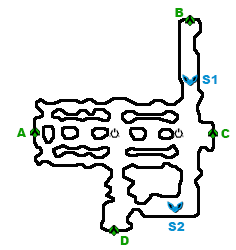
<style>
.page{position:relative;width:236px;height:250px;background:#ffffff}
.page>*{position:absolute;margin:0}
.t1{font:12px "Arial-Black";color:#0d9e01}
.t2{font:12px "Arial-Black";color:#0692d2}
</style>
<div class="page">
<p class="t1" style="left:175px;top:8px;width:9px;height:9px">B</p>
<p class="t2" style="left:202px;top:75px;width:15px;height:9px">S1</p>
<p class="t1" style="left:16px;top:128px;width:10px;height:9px">A</p>
<p class="t1" style="left:221px;top:129px;width:9px;height:9px">C</p>
<p class="t2" style="left:168px;top:222px;width:17px;height:9px">S2</p>
<p class="t1" style="left:120px;top:236px;width:9px;height:9px">D</p>
</div>
